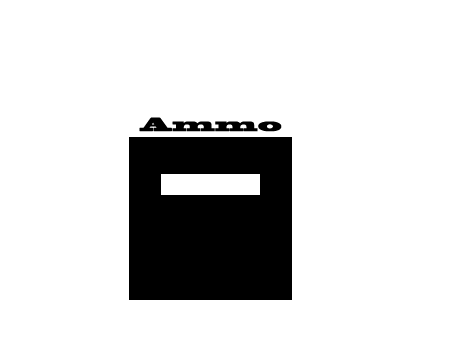
<style>
.page{position:relative;width:454px;height:340px;background:#ffffff}
.page>*{position:absolute;margin:0}
.t1{font:18px "BlackoakStd";color:#000000}
</style>
<div class="page">
<p class="t1" style="left:139px;top:117px;width:143px;height:15px">Ammo</p>
</div>
